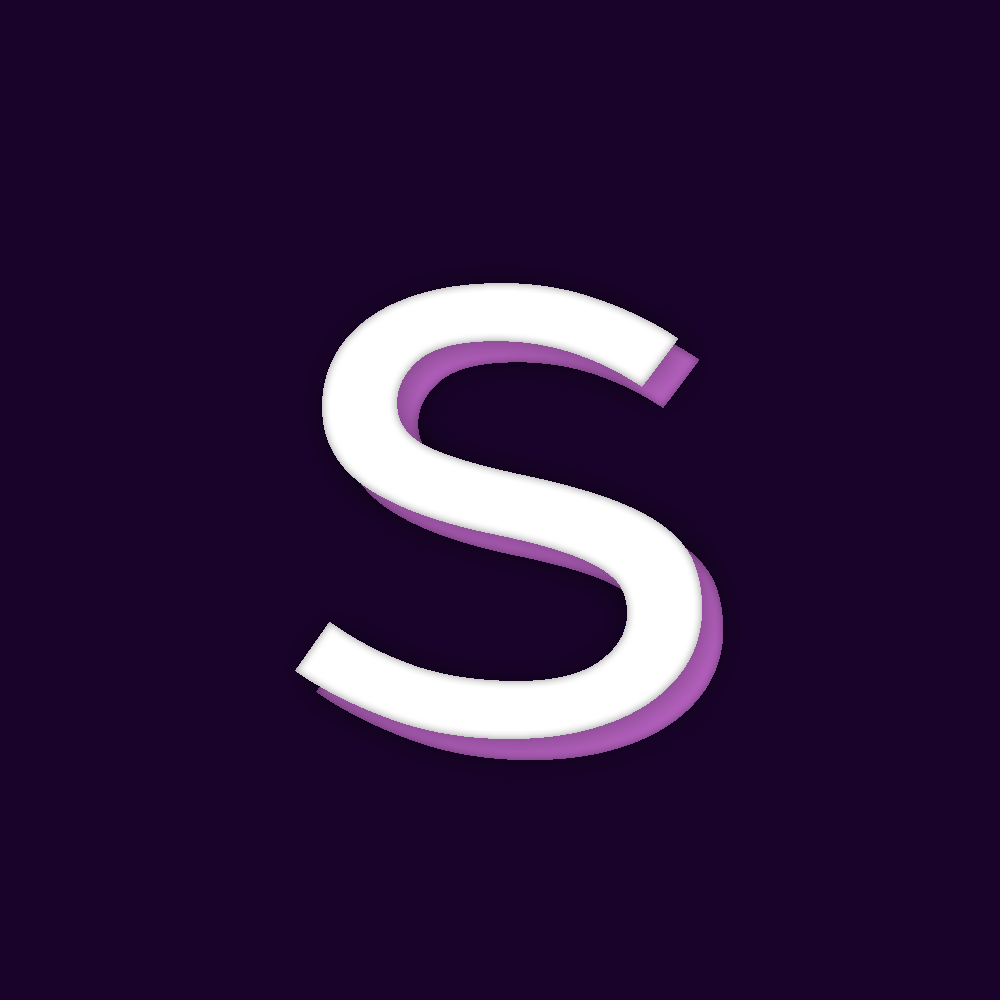
<style>
.page{position:relative;width:1000px;height:1000px;background:#1a032b}
.page>*{position:absolute;margin:0}
.t1{font:891.9px "SourceCodePro-Regular";color:#ffffff}
.t2{font:891.9px "SourceCodePro-Regular"}
</style>
<div class="page">
<p class="t1" style="left:295px;top:283px;width:407px;height:456px">s</p>
<p class="t2" style="left:316px;top:304px;width:407px;height:456px">s</p>
</div>
